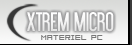
<style>
.page{position:relative;width:132px;height:45px}
.page>*{position:absolute;margin:0}
.t1{font:26px "LibelSuit";color:#ffffff}
.t2{font:8px "04b08";color:#797979}
</style>
<div class="page">
<p class="t1" style="left:27px;top:12px;width:87px;height:20px">XTREM MICRO</p>
<p class="t2" style="left:41px;top:35px;width:62px;height:5px">MATERIEL PC</p>
</div>
